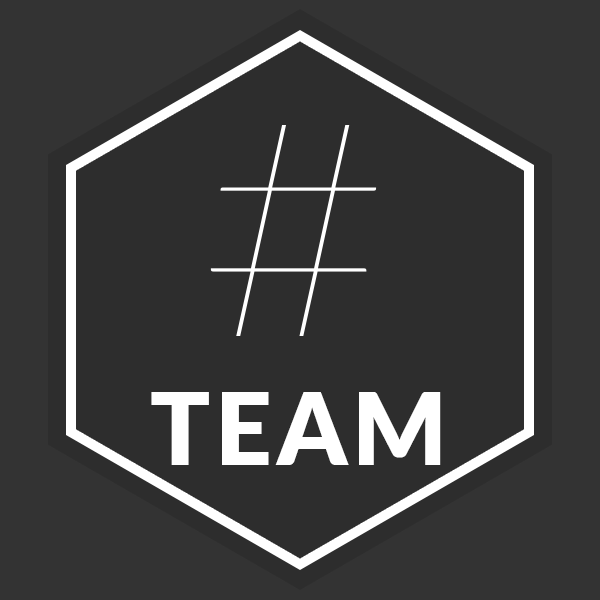
<style>
.page{position:relative;width:600px;height:600px;background:#2d2d2d}
.page>*{position:absolute;margin:0}
.t1{font:100px "Lato-Black";letter-spacing:0.05em;color:#ffffff}
</style>
<div class="page">
<p class="t1" style="left:151px;top:392px;width:290px;height:73px">TEAM</p>
</div>
